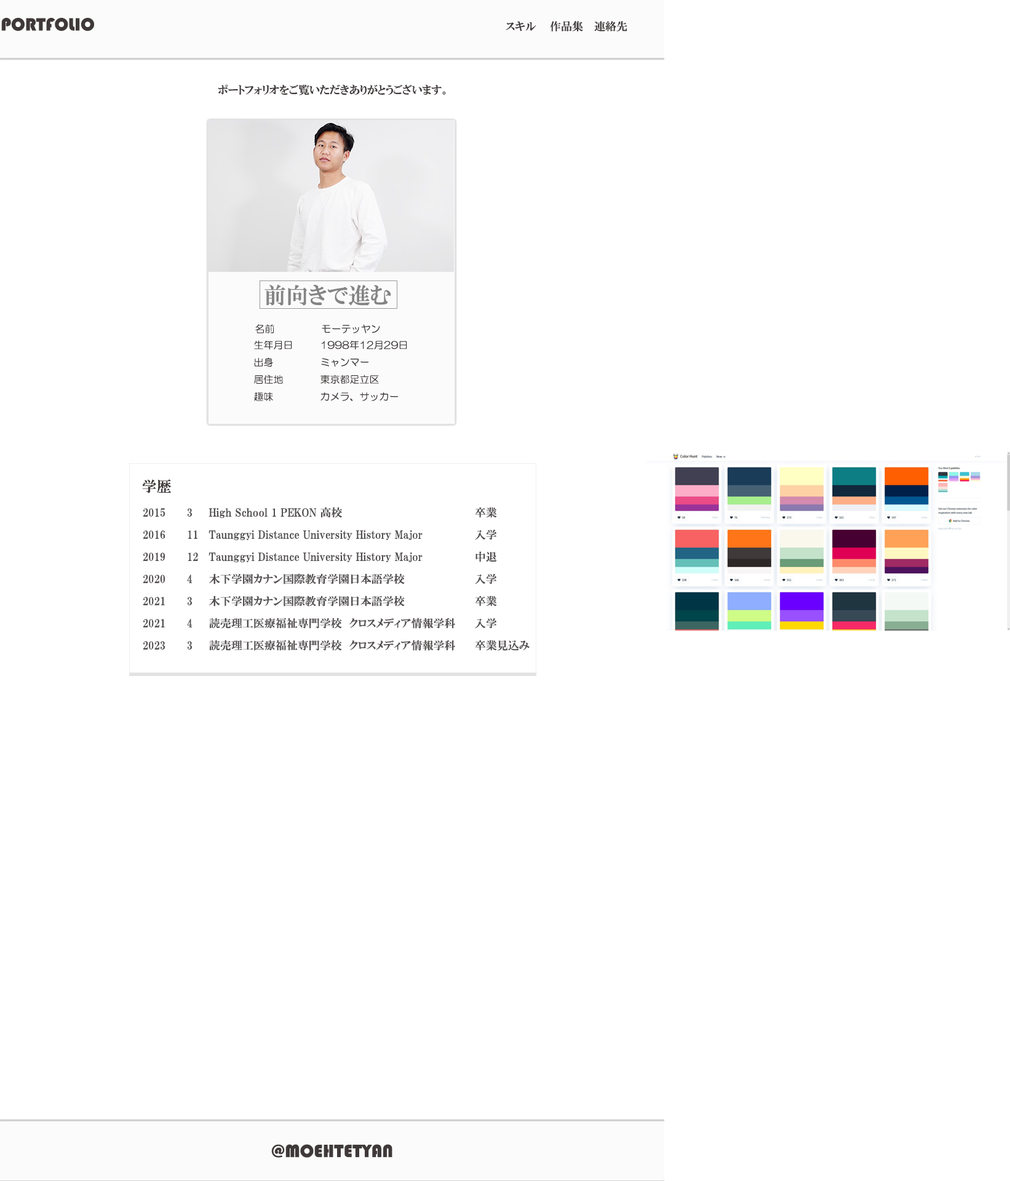
<style>
.page{position:relative;width:1010px;height:1181px;background:#ffffff}
.page>*{position:absolute;margin:0}
.t1{font:18.5px "Bauhaus93";color:#3f3939}
.t2{font:11.1px "HGPMinchoE";color:#3f3939}
.t3{font:22.1px "HGPMinchoE";color:#858484}
.t4{font:9.8px "HGMaruGothicMPRO";color:#3f3939}
.t5{font:14.8px "HGPMinchoE";color:#3f3939}
.t6{font:11.1px/22.1px "HGPMinchoE";color:#534f4f}
</style>
<div class="page">
<p class="t1" style="left:1px;top:18px;width:93px;height:13px">PORTFOLIO</p>
<p class="t2" style="left:506px;top:21px;width:121px;height:11px">スキル 作品集 連絡先</p>
<p class="t2" style="left:218px;top:84px;width:228px;height:11px">ポートフォリオをご覧いただきありがとうございます。</p>
<p class="t3" style="left:264px;top:284px;width:127px;height:22px">前向きで進む</p>
<p class="t4" style="left:255px;top:324px;width:125px;height:9px">名前   モーテッヤン</p>
<p class="t4" style="left:254px;top:340px;width:153px;height:62px">生年月日  1998年12月29日 <br>出身   ミャンマー<br>居住地  東京都足立区<br>趣味   カメラ、サッカー</p>
<p class="t5" style="left:142px;top:479px;width:29px;height:14px">学歴</p>
<p class="t6" style="left:143px;top:507px;width:387px;height:144px">2015 3 High School 1 PEKON 高校      卒業<br>2016 11 Taunggyi Distance University History Major   入学<br>2019 12 Taunggyi Distance University History Major   中退 <br>2020 4 木下学園カナン国際教育学園日本語学校    入学<br>2021 3 木下学園カナン国際教育学園日本語学校    卒業<br>2021 4 読売理工医療福祉専門学校　クロスメディア情報学科 入学<br>2023 3 読売理工医療福祉専門学校　クロスメディア情報学科 卒業見込み</p>
<p class="t1" style="left:271px;top:1144px;width:121px;height:13px">@MOEHTETYAN</p>
</div>
